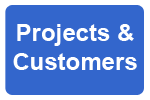
<style>
.page{position:relative;width:150px;height:100px;background:#3366cc}
.page>*{position:absolute;margin:0}
.t1{font:24px "Arial-BoldMT";color:#ffffff}
</style>
<div class="page">
<p class="t1" style="left:13px;top:24px;width:124px;height:46px;text-align:center">Projects &amp;<br>Customers</p>
</div>
